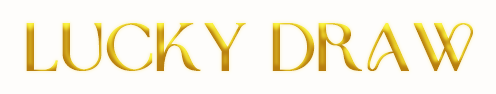
<style>
.page{position:relative;width:496px;height:94px;background:#fefdfb}
.page>*{position:absolute;margin:0}
.t1{font:66.7px "BrownSugar";font-weight:bold;scale:1.04 1}
</style>
<div class="page">
<p class="t1" style="left:26px;top:23px;width:447px;height:48px">LUCKY DRAW</p>
</div>
